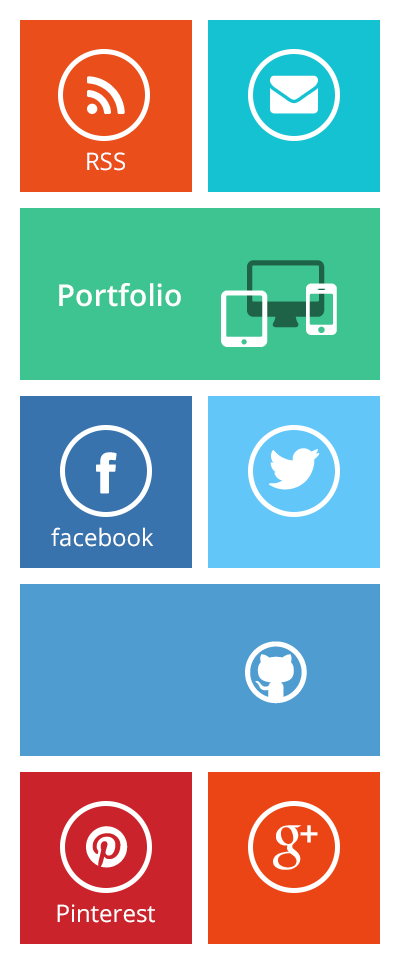
<style>
.page{position:relative;width:400px;height:964px;background:#ffffff}
.page>*{position:absolute;margin:0}
.t1{font:24px "OpenSans";color:#ffffff}
.t2{font:30px "OpenSans-Semibold";color:#ffffff}
</style>
<div class="page">
<p class="t1" style="left:87px;top:152px;width:38px;height:19px">RSS</p>
<p class="t2" style="left:59px;top:283px;width:122px;height:24px">Portfolio</p>
<p class="t1" style="left:51px;top:527px;width:103px;height:20px">facebook</p>
<p class="t1" style="left:57px;top:904px;width:98px;height:19px">Pinterest</p>
</div>
